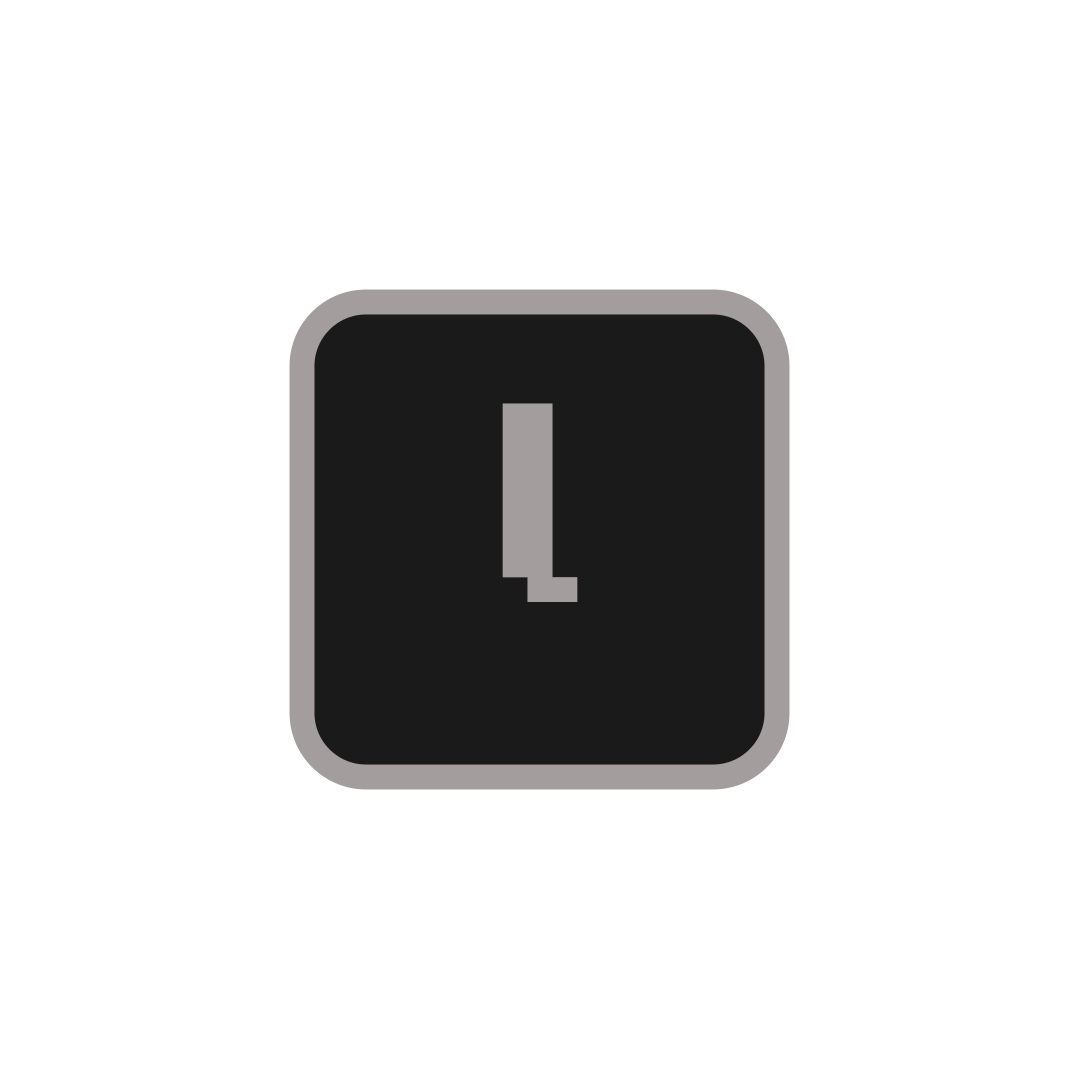
<style>
.page{position:relative;width:1080px;height:1080px;background:#ffffff}
.page>*{position:absolute;margin:0}
.t1{font:272.9px "RetroGaming";color:#a39d9d}
</style>
<div class="page">
<p class="t1" style="left:502px;top:403px;width:76px;height:199px">l</p>
</div>
